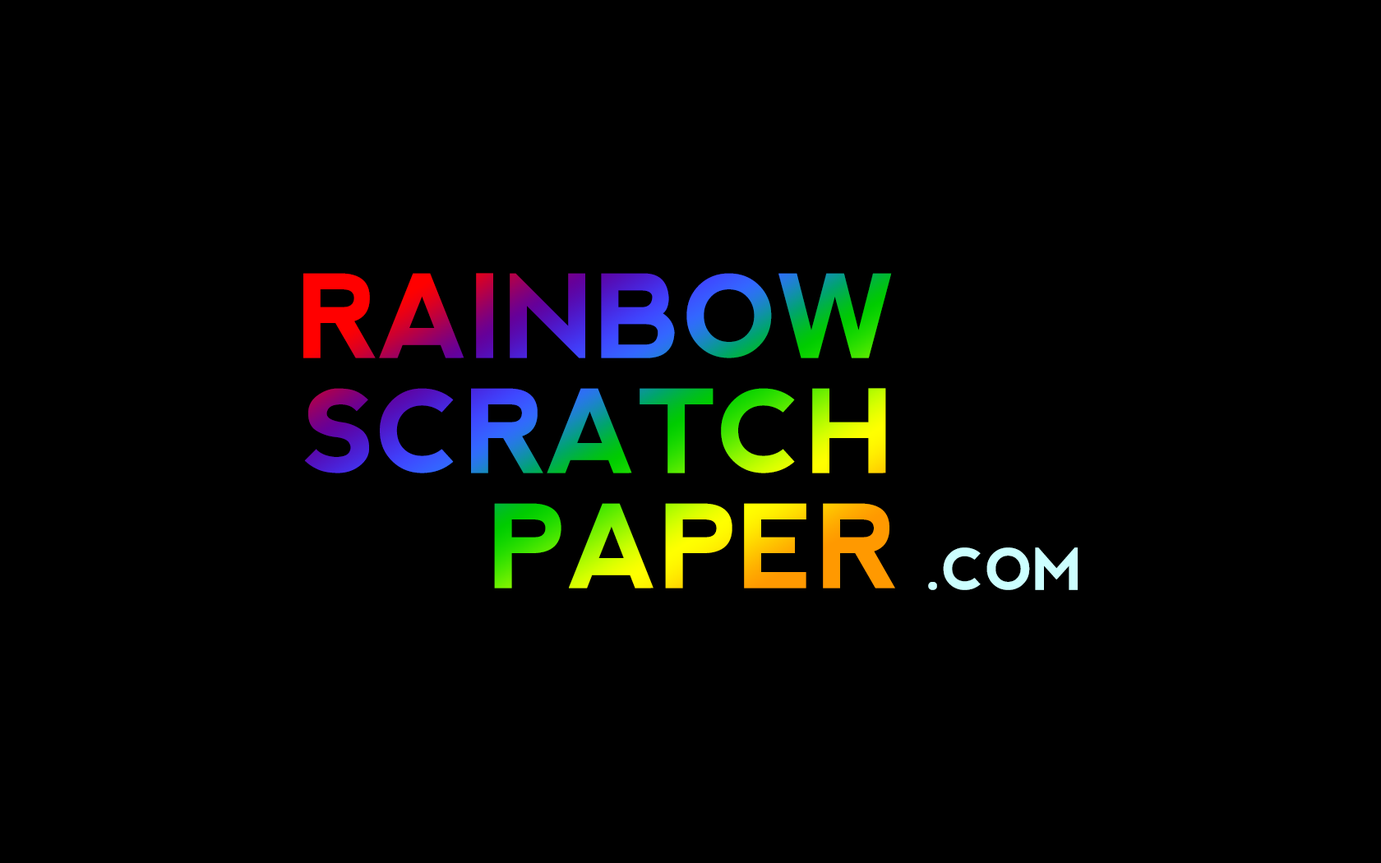
<style>
.page{position:relative;width:1381px;height:863px;background:#000000}
.page>*{position:absolute;margin:0}
.t1{font:115.1px/115.1px "nevis-Bold";text-transform:uppercase}
.t2{font:57.6px "nevis-Bold";color:#ccffff;text-transform:uppercase}
</style>
<div class="page">
<p class="t1" style="left:303px;top:273px;width:592px;height:316px;text-align:right">Rainbow<br>Scratch<br>Paper</p>
<p class="t2" style="left:928px;top:548px;width:150px;height:42px">.com</p>
</div>
